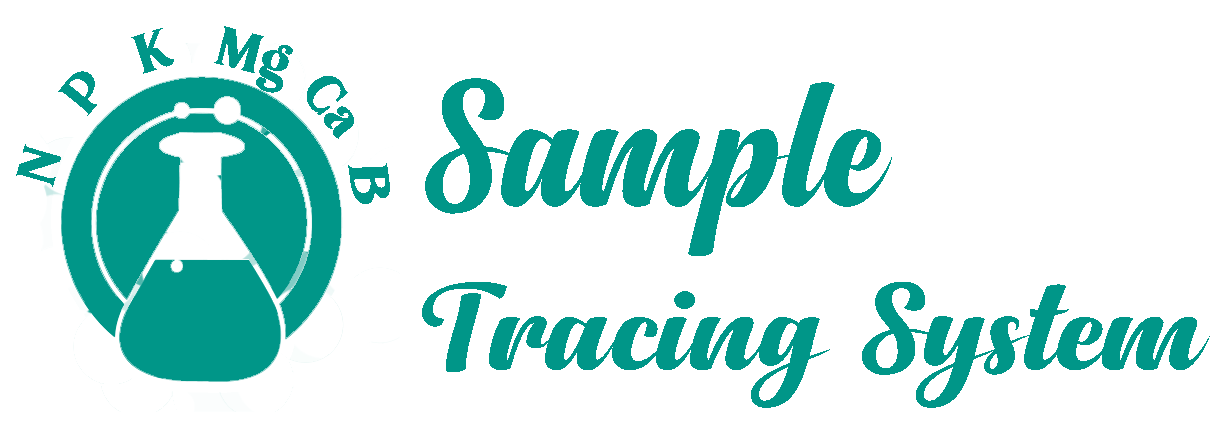
<style>
.page{position:relative;width:1223px;height:427px;background:#ffffff}
.page>*{position:absolute;margin:0}
.t1{font:81.6px "Karimun";color:#009688}
.t2{font:81.9px "Karimun";color:#009688}
.t3{font:82.1px "Karimun";color:#009688}
.t4{font:182.8px "Anydore";color:#009688;scale:1.09 1}
.t5{font:82.2px "Karimun";color:#009688}
.t6{font:83.5px "Karimun";color:#009688;scale:1.16 1}
.t7{font:126.1px "Anydore";color:#009688;scale:1.27 1}
</style>
<div class="page">
<p class="t1" style="left:131px;top:28px;width:43px;height:46px;rotate:-17deg">K</p>
<p class="t2" style="left:214px;top:26px;width:79px;height:67px;rotate:14deg">Mg</p>
<p class="t2" style="left:58px;top:71px;width:39px;height:45px;rotate:-51deg">P</p>
<p class="t3" style="left:307px;top:76px;width:47px;height:63px;rotate:52deg">Ca</p>
<p class="t4" style="left:425px;top:78px;width:467px;height:178px">Sample</p>
<p class="t5" style="left:16px;top:144px;width:45px;height:43px;rotate:-75deg">N</p>
<p class="t6" style="left:348px;top:163px;width:42px;height:41px;rotate:82deg">B</p>
<p class="t7" style="left:422px;top:282px;width:788px;height:126px">Tracing System</p>
</div>
